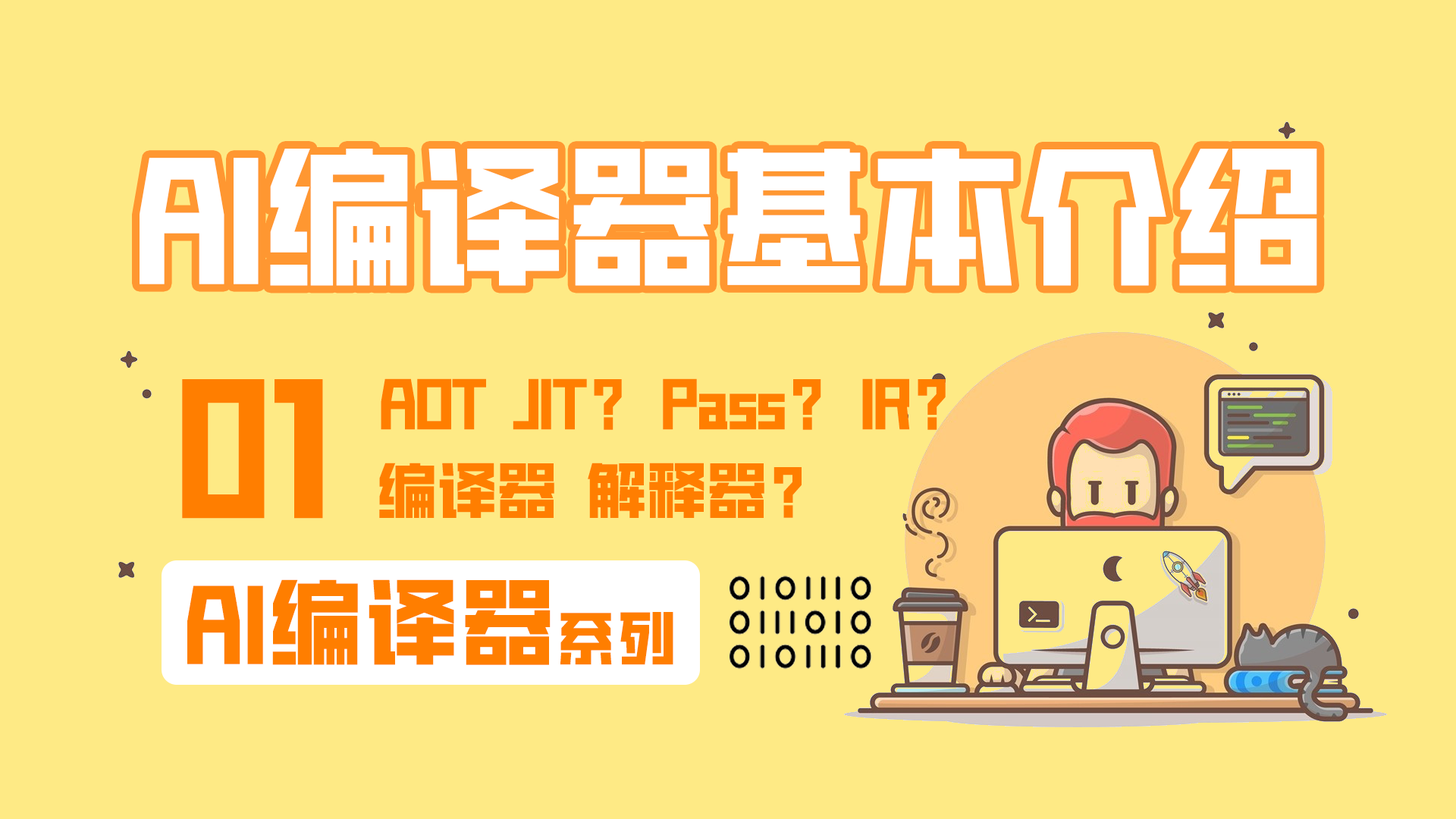
<style>
.page{position:relative;width:1456px;height:819px;background:#feea85}
.page>*{position:absolute;margin:0}
.t1{font:151.7px "HGGTZHVF-Medium";color:#ffffff}
.t2{font:166.8px "HGGTZHVF-Medium";letter-spacing:-0.01em;color:#ff7e00}
.t3{font:60.7px "HGGTZHVF-Medium";letter-spacing:-0.01em;color:#ff7e00;font-weight:bold}
.t4{font:93.8px "HGGTZHVF-Medium";letter-spacing:0.025em;color:#ff7e00;font-weight:bold}
.t5{font:58.2px "HGGTZHVF-Medium";letter-spacing:0.05em;color:#ff7e00;font-weight:bold}
</style>
<div class="page">
<p class="t1" style="left:140px;top:149px;width:1177px;height:137px">AI编译器基本介绍</p>
<p class="t2" style="left:182px;top:379px;width:141px;height:140px">01</p>
<p class="t3" style="left:381px;top:378px;width:565px;height:52px">AOT JIT？ Pass？ IR？</p>
<p class="t3" style="left:379px;top:463px;width:423px;height:55px">编译器 解释器？</p>
<p class="t4" style="left:187px;top:579px;width:364px;height:86px">AI编译器</p>
<p class="t5" style="left:560px;top:612px;width:113px;height:53px">系列</p>
</div>
